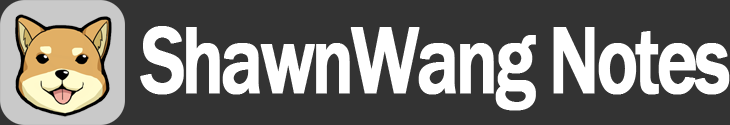
<style>
.page{position:relative;width:730px;height:125px;background:#333333}
.page>*{position:absolute;margin:0}
.t1{font:96.8px "FranklinGothic-Medium";letter-spacing:-0.06em;color:#ffffff;font-weight:bold;scale:0.8 1}
</style>
<div class="page">
<p class="t1" style="left:140px;top:26px;width:590px;height:85px">ShawnWang Notes</p>
</div>
